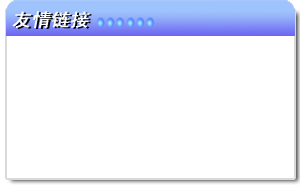
<style>
.page{position:relative;width:300px;height:186px;background:#ffffff}
.page>*{position:absolute;margin:0}
.t1{font:18px "SimHei";color:#ffffff;font-weight:bold;font-style:italic;scale:1.04 1}
</style>
<div class="page">
<p class="t1" style="left:12px;top:11px;width:78px;height:17px">友情链接</p>
</div>
